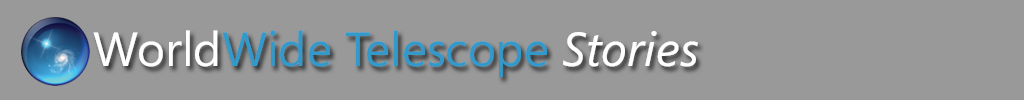
<style>
.page{position:relative;width:1024px;height:100px;background:#999999}
.page>*{position:absolute;margin:0}
.t1{font:48px "Segoe";color:#3399cc}
.t2{font:48px "Segoe";color:#ffffff}
.t3{font:48px "Segoe-Italic";color:#ffffff}
</style>
<div class="page">
<p class="t1" style="left:93px;top:30px;width:605px;height:47px"><span class="t2">World</span>Wide Telescope <span class="t3">Stories</span></p>
</div>
